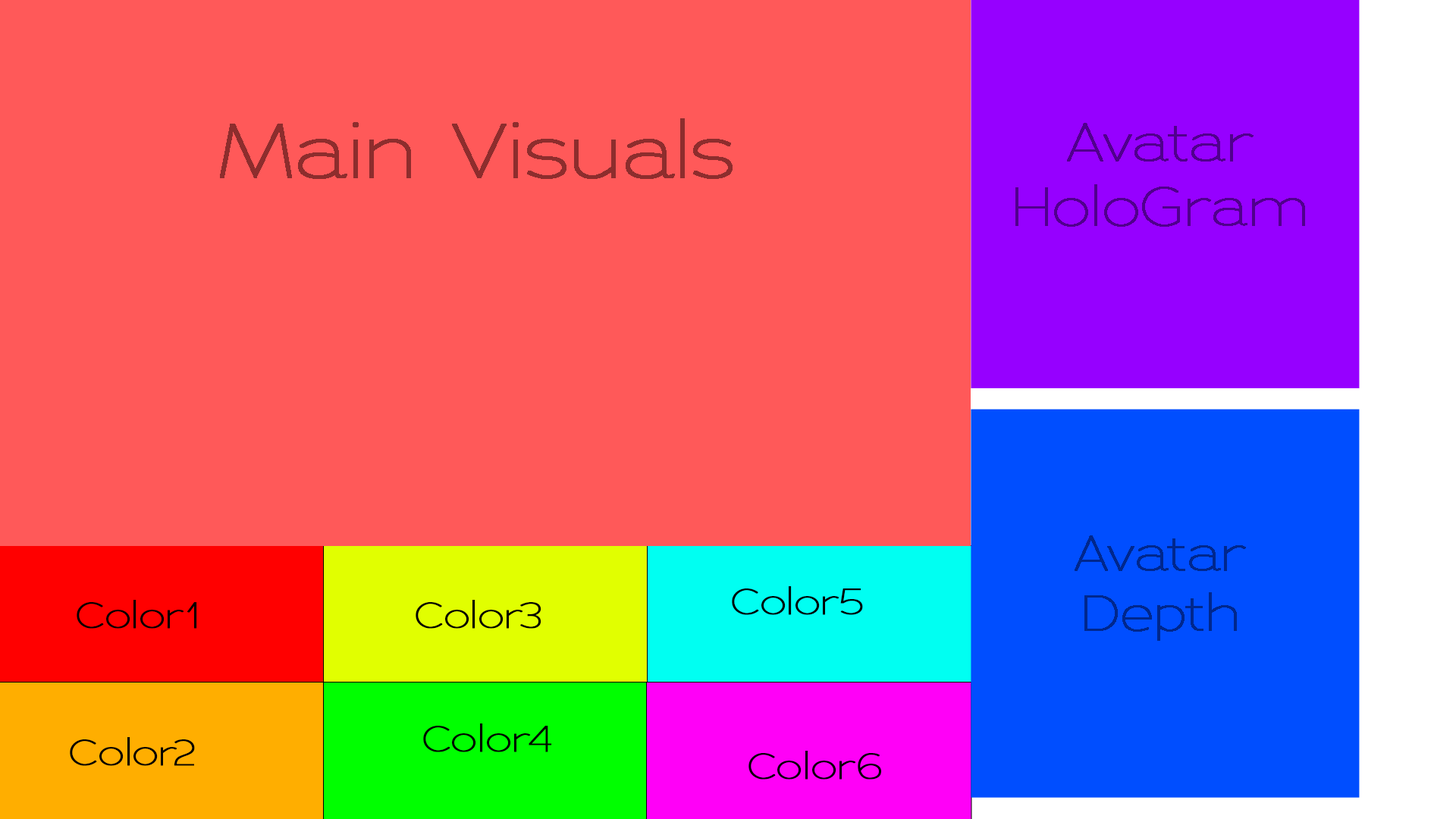
<style>
.page{position:relative;width:1456px;height:819px;background:#ff5959}
.page>*{position:absolute;margin:0}
.t1{font:75.8px "AdriannaExtended-Thin";color:#8d2d2d;font-weight:bold}
.t2{font:53.7px "AdriannaExtended-Thin";color:#50008d;font-weight:bold}
.t3{font:49.4px "AdriannaExtended-Thin";color:#00278d;font-weight:bold}
.t4{font:36.4px "AdriannaExtended-Thin";color:#000000;font-weight:bold}
</style>
<div class="page">
<p class="t1" style="left:220px;top:118px;width:513px;height:61px">Main Visuals</p>
<p class="t2" style="left:1015px;top:123px;width:290px;height:104px;text-align:center">Avatar HoloGram</p>
<p class="t3" style="left:1075px;top:535px;width:171px;height:106px;text-align:center">Avatar Depth</p>
<p class="t4" style="left:732px;top:586px;width:131px;height:29px">Color5</p>
<p class="t4" style="left:77px;top:600px;width:120px;height:29px">Color1</p>
<p class="t4" style="left:416px;top:600px;width:125px;height:29px">Color3</p>
<p class="t4" style="left:423px;top:723px;width:129px;height:29px">Color4</p>
<p class="t4" style="left:70px;top:737px;width:125px;height:29px">Color2</p>
<p class="t4" style="left:748px;top:751px;width:133px;height:29px">Color6</p>
</div>
